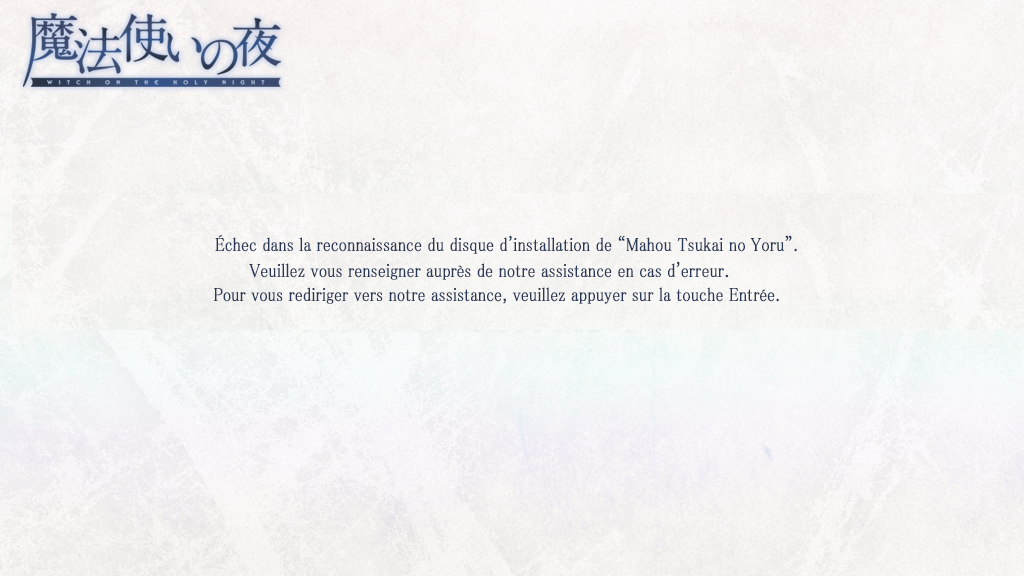
<style>
.page{position:relative;width:1024px;height:576px}
.page>*{position:absolute;margin:0}
.t1{font:19px "MS-PMincho";color:#2b3958;font-weight:bold;scale:0.84 1}
</style>
<div class="page">
<p class="t1" style="left:215px;top:235px;width:582px;height:19px">Échec dans la reconnaissance du disque d'installation de “Mahou Tsukai no Yoru”.</p>
<p class="t1" style="left:214px;top:261px;width:565px;height:43px">Veuillez vous renseigner auprès de notre assistance en cas d'erreur.<br>                 Pour vous rediriger vers notre assistance, veuillez appuyer sur la touche Entrée.</p>
</div>
